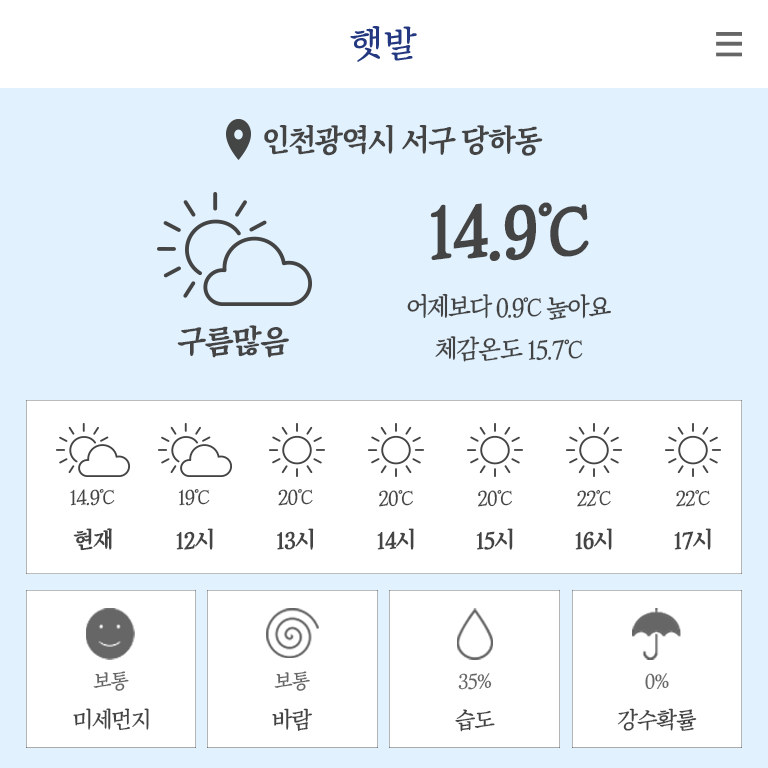
<style>
.page{position:relative;width:768px;height:768px;background:#ffffff}
.page>*{position:absolute;margin:0}
.t1{font:31.3px "TTSoopilmyungjoH";letter-spacing:-0.06em;color:#444444;scale:0.96 1}
.t2{font:72.8px "TTSoopilmyungjoH";letter-spacing:-0.06em;color:#444444;scale:0.94 1}
.t3{font:26.3px "TTSoopilmyungjoM";letter-spacing:-0.08em;color:#444444;scale:0.94 1}
.t4{font:32.3px "TTSoopilmyungjoH";letter-spacing:-0.06em;color:#444444}
.t5{font:25.9px "TTSoopilmyungjoM";letter-spacing:-0.06em;color:#444444;scale:0.95 1}
.t6{font:20.6px "TTSoopilmyungjoM";letter-spacing:-0.06em;color:#444444;scale:0.96 1}
.t7{font:20.7px "TTSoopilmyungjoM";letter-spacing:-0.06em;color:#444444;scale:0.96 1}
.t8{font:23.2px "TTSoopilmyungjoH";letter-spacing:-0.06em;color:#444444;scale:0.96 1}
.t9{font:23.3px "TTSoopilmyungjoH";letter-spacing:-0.06em;color:#444444;scale:0.96 1}
.t10{font:20.6px "TTSoopilmyungjoM";letter-spacing:-0.06em;color:#666666;scale:0.95 1}
.t11{font:20.6px "TTSoopilmyungjoM";letter-spacing:-0.06em;color:#666666;scale:0.96 1}
.t12{font:23.1px "TTSoopilmyungjoM";letter-spacing:-0.06em;color:#444444;scale:0.95 1}
.t13{font:23.1px "TTSoopilmyungjoM";letter-spacing:-0.06em;color:#444444;scale:0.96 1}
</style>
<div class="page">
<p class="t1" style="left:264px;top:125px;width:279px;height:31px">인천광역시 서구 당하동</p>
<p class="t2" style="left:430px;top:202px;width:159px;height:59px">14.9℃</p>
<p class="t3" style="left:407px;top:293px;width:204px;height:27px">어제보다 0.9℃ 높아요</p>
<p class="t4" style="left:177px;top:325px;width:112px;height:33px">구름많음</p>
<p class="t5" style="left:435px;top:336px;width:148px;height:26px">체감온도 15.7℃</p>
<p class="t6" style="left:70px;top:489px;width:45px;height:17px">14.9℃</p>
<p class="t6" style="left:179px;top:489px;width:31px;height:17px">19℃</p>
<p class="t6" style="left:278px;top:489px;width:35px;height:17px">20℃</p>
<p class="t7" style="left:379px;top:490px;width:34px;height:17px">20℃</p>
<p class="t7" style="left:478px;top:490px;width:34px;height:17px">20℃</p>
<p class="t7" style="left:577px;top:489px;width:34px;height:18px">22℃</p>
<p class="t7" style="left:676px;top:489px;width:34px;height:18px">22℃</p>
<p class="t8" style="left:73px;top:528px;width:39px;height:23px">현재</p>
<p class="t8" style="left:176px;top:528px;width:37px;height:22px">12시</p>
<p class="t8" style="left:277px;top:528px;width:37px;height:22px">13시</p>
<p class="t9" style="left:377px;top:528px;width:37px;height:22px">14시</p>
<p class="t9" style="left:476px;top:528px;width:37px;height:22px">15시</p>
<p class="t9" style="left:575px;top:528px;width:37px;height:22px">16시</p>
<p class="t9" style="left:674px;top:528px;width:37px;height:22px">17시</p>
<p class="t10" style="left:93px;top:671px;width:36px;height:20px">보통</p>
<p class="t11" style="left:274px;top:671px;width:36px;height:20px">보통</p>
<p class="t11" style="left:458px;top:673px;width:34px;height:17px">35%</p>
<p class="t11" style="left:645px;top:673px;width:24px;height:17px">0%</p>
<p class="t12" style="left:73px;top:708px;width:76px;height:23px">미세먼지</p>
<p class="t13" style="left:272px;top:708px;width:40px;height:23px">바람</p>
<p class="t13" style="left:455px;top:709px;width:40px;height:23px">습도</p>
<p class="t13" style="left:617px;top:708px;width:80px;height:23px">강수확률</p>
</div>
